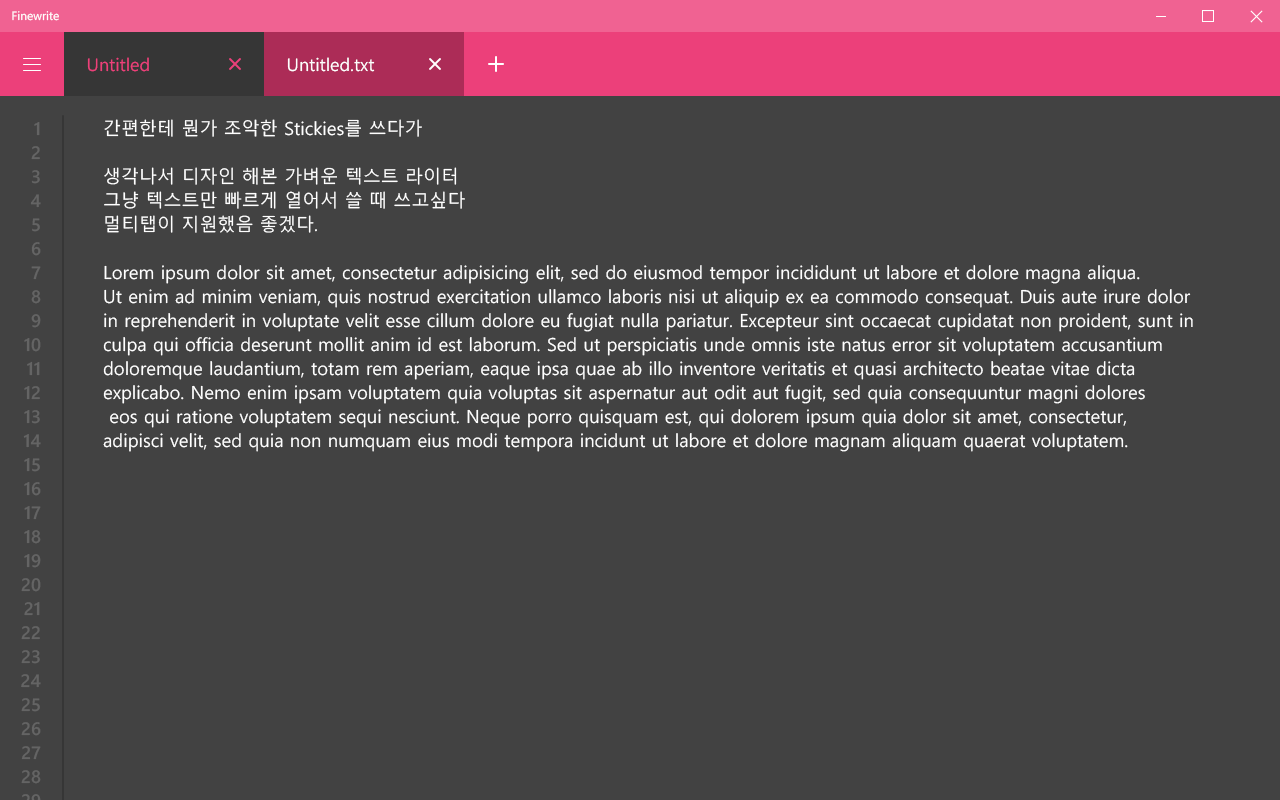
<style>
.page{position:relative;width:1280px;height:800px;background:#424242}
.page>*{position:absolute;margin:0}
.t1{font:12px "SegoeUI";color:#ffffff}
.t2{font:18px "SegoeUI";color:#ec407a}
.t3{font:18px "SegoeUI";color:#ffffff}
.t4{font:18px/24px "MalgunGothic";color:#ffffff}
</style>
<div class="page">
<p class="t1" style="left:12px;top:11px;width:47px;height:10px">Finewrite</p>
<p class="t2" style="left:87px;top:57px;width:62px;height:15px">Untitled</p>
<p class="t3" style="left:287px;top:57px;width:88px;height:15px">Untitled.txt</p>
<p class="t4" style="left:103px;top:119px;width:1090px;height:333px">간편한테 뭔가 조악한 Stickies를 쓰다가<br><br>생각나서 디자인 해본 가벼운 텍스트 라이터<br>그냥 텍스트만 빠르게 열어서 쓸 때 쓰고싶다<br>멀티탭이 지원했음 좋겠다.<br><br>Lorem ipsum dolor sit amet, consectetur adipisicing elit, sed do eiusmod tempor incididunt ut labore et dolore magna aliqua. <br>Ut enim ad minim veniam, quis nostrud exercitation ullamco laboris nisi ut aliquip ex ea commodo consequat. Duis aute irure dolor <br>in reprehenderit in voluptate velit esse cillum dolore eu fugiat nulla pariatur. Excepteur sint occaecat cupidatat non proident, sunt in <br>culpa qui officia deserunt mollit anim id est laborum. Sed ut perspiciatis unde omnis iste natus error sit voluptatem accusantium <br>doloremque laudantium, totam rem aperiam, eaque ipsa quae ab illo inventore veritatis et quasi architecto beatae vitae dicta <br>explicabo. Nemo enim ipsam voluptatem quia voluptas sit aspernatur aut odit aut fugit, sed quia consequuntur magni dolores<br> eos qui ratione voluptatem sequi nesciunt. Neque porro quisquam est, qui dolorem ipsum quia dolor sit amet, consectetur, <br>adipisci velit, sed quia non numquam eius modi tempora incidunt ut labore et dolore magnam aliquam quaerat voluptatem.</p>
</div>
